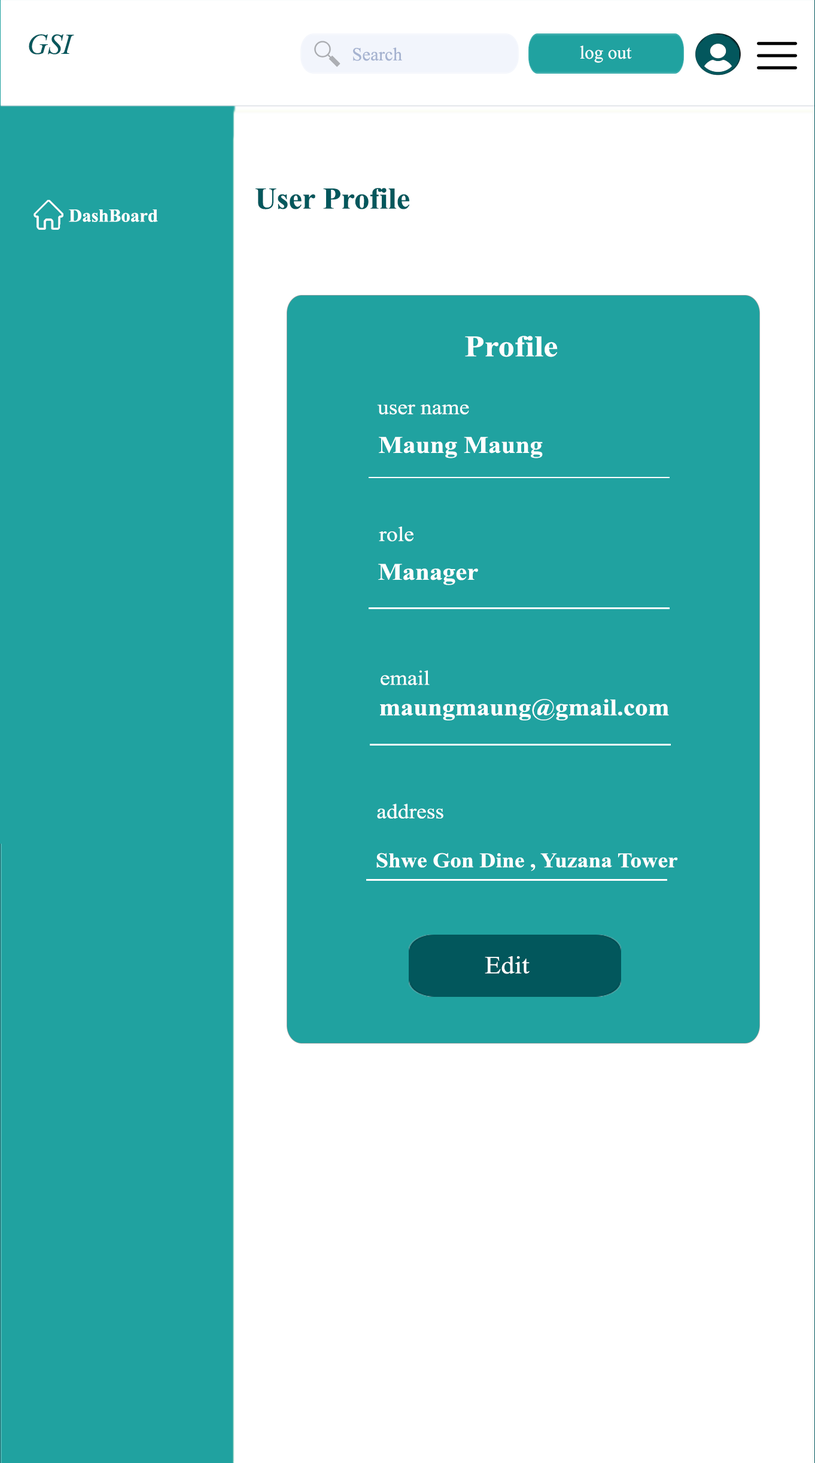
<style>
.page{position:relative;width:815px;height:1463px;background:#20a2a0}
.page>*{position:absolute;margin:0}
.t1{font:28.7px "TimesNewRomanPS-ItalicMT";color:#02575c}
.t2{font:18.5px "TimesNewRomanPSMT";color:#a6b3d0}
.t3{font:18.5px "TimesNewRomanPSMT";color:#ffffff}
.t4{font:30.4px "TimesNewRomanPS-BoldMT";color:#02575c}
.t5{font:18.5px "TimesNewRomanPS-BoldMT";color:#ffffff}
.t6{font:29.9px "TimesNewRomanPS-BoldMT";color:#ffffff;scale:1.09 1}
.t7{font:20.7px "TimesNewRomanPSMT";color:#ffffff;scale:1.09 1}
.t8{font:23.7px "TimesNewRomanPS-BoldMT";color:#ffffff;scale:1.09 1}
.t9{font:20.7px "TimesNewRomanPS-BoldMT";color:#ffffff;scale:1.09 1}
.t10{font:24.6px "TimesNewRomanPSMT";color:#ffffff;scale:1.09 1}
</style>
<div class="page">
<p class="t1" style="left:29px;top:34px;width:45px;height:20px">GSI</p>
<p class="t2" style="left:353px;top:47px;width:49px;height:14px">Search</p>
<p class="t3" style="left:580px;top:45px;width:52px;height:18px">log out</p>
<p class="t4" style="left:256px;top:188px;width:153px;height:21px">User Profile</p>
<p class="t5" style="left:69px;top:209px;width:89px;height:13px">DashBoard</p>
<p class="t6" style="left:465px;top:336px;width:93px;height:21px">Profile</p>
<p class="t7" style="left:377px;top:405px;width:92px;height:10px">user name</p>
<p class="t8" style="left:379px;top:437px;width:164px;height:21px">Maung Maung</p>
<p class="t7" style="left:379px;top:527px;width:34px;height:15px">role</p>
<p class="t8" style="left:378px;top:564px;width:100px;height:21px">Manager</p>
<p class="t7" style="left:381px;top:670px;width:49px;height:15px">email</p>
<p class="t8" style="left:380px;top:699px;width:289px;height:21px">maungmaung@gmail.com</p>
<p class="t7" style="left:377px;top:804px;width:66px;height:15px">address</p>
<p class="t9" style="left:376px;top:853px;width:302px;height:18px">Shwe Gon Dine , Yuzana Tower</p>
<p class="t10" style="left:485px;top:956px;width:45px;height:18px">Edit</p>
</div>
